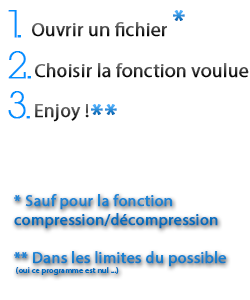
<style>
.page{position:relative;width:250px;height:300px;background:#ffffff}
.page>*{position:absolute;margin:0}
.t1{font:36px "DevilBreezeLight";color:#0090ff;font-weight:bold}
.t2{font:30px "MyriadPro-Regular";font-weight:bold}
.t3{font:19px "MyriadPro-Regular";font-weight:bold}
.t4{font:16px "MyriadPro-Regular";color:#0870c0;font-weight:bold}
.t5{font:16px "MyriadPro-Regular";color:#177ecf;font-weight:bold}
.t6{font:8px "MyriadPro-Regular";color:#177ecf;font-weight:bold}
</style>
<div class="page">
<p class="t1" style="left:8px;top:10px;width:13px;height:28px">1.</p>
<p class="t2" style="left:173px;top:10px;width:12px;height:11px">*</p>
<p class="t3" style="left:32px;top:22px;width:135px;height:15px">Ouvrir un fichier</p>
<p class="t1" style="left:8px;top:51px;width:23px;height:28px">2.</p>
<p class="t3" style="left:35px;top:63px;width:214px;height:15px">Choisir la fonction voulue</p>
<p class="t1" style="left:8px;top:91px;width:22px;height:28px">3.</p>
<p class="t3" style="left:35px;top:104px;width:54px;height:18px">Enjoy !</p>
<p class="t2" style="left:91px;top:104px;width:12px;height:11px">*</p>
<p class="t2" style="left:105px;top:104px;width:12px;height:11px">*</p>
<p class="t4" style="left:14px;top:194px;width:204px;height:35px">* Sauf pour la fonction<br>compression/décompression</p>
<p class="t5" style="left:14px;top:251px;width:213px;height:24px">** Dans les limites du possible<br><span class="t6"> (oui ce programme est nul ...)</span></p>
</div>
